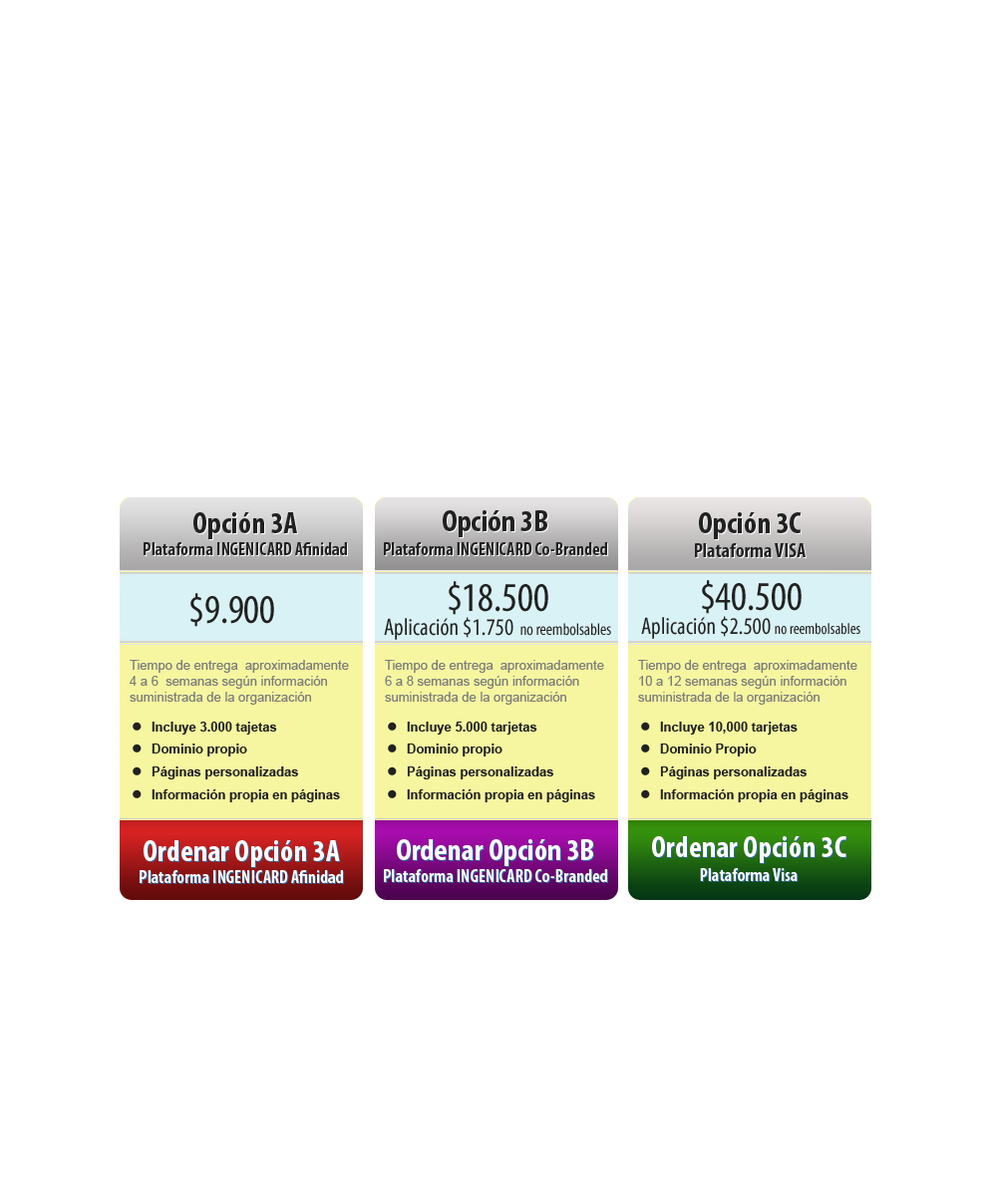
<style>
.page{position:relative;width:997px;height:1196px;background:#ffffff}
.page>*{position:absolute;margin:0}
.t1{font:17.9px "MyriadPro-BoldCond";color:#212121}
.t2{font:30.9px "MyriadPro-BoldCond";color:#212121}
.t3{font:17.9px/23.9px "MyriadPro-BoldCond";color:#212121}
.t4{font:30.9px/23.9px "MyriadPro-BoldCond";color:#212121}
.t5{font:19.9px/23.9px "MyriadPro-BoldCond";color:#212121}
.t6{font:23.9px/23.9px "MyriadPro-Cond";color:#212121}
.t7{font:40.9px/23.9px "MyriadPro-Cond";color:#212121}
.t8{font:16.9px/19.9px "MyriadPro-Cond";color:#212121}
.t9{font:15.9px/23.9px "MyriadPro-Cond";color:#212121}
.t10{font:40.9px "MyriadPro-Cond";color:#212121}
.t11{font:13px/15.9px "ArialMT";color:#7c7c7c}
.t12{font:13px "Arial-BoldMT";color:#212121}
.t13{font:17.9px "MyriadPro-BoldCond";color:#ffffff}
.t14{font:30.9px "MyriadPro-BoldCond";color:#ffffff}
.t15{font:30.9px/23.9px "MyriadPro-BoldCond";color:#ffffff}
.t16{font:17.9px/23.9px "MyriadPro-BoldCond";color:#ffffff}
</style>
<div class="page">
<p class="t1" style="left:144px;top:512px;width:203px;height:43px;text-align:center"><span class="t2">Opción 3A<br></span>Plataforma INGENICARD Afinidad</p>
<p class="t3" style="left:384px;top:510px;width:223px;height:45px;text-align:center"><span class="t4">Opción 3B<br></span>Plataforma INGENICARD Co-Branded</p>
<p class="t5" style="left:695px;top:512px;width:110px;height:45px;text-align:center"><span class="t4">Opción 3C<br></span>Plataforma VISA</p>
<p class="t6" style="left:384px;top:581px;width:227px;height:59px;text-align:center"><span class="t7">$18.500<br></span>Aplicación $1.750 <span class="t8">no reembolsables</span></p>
<p class="t6" style="left:641px;top:580px;width:219px;height:59px;text-align:center"><span class="t7">$40.500<br></span>Aplicación $2.500 <span class="t9">no reembolsables</span></p>
<p class="t10" style="left:190px;top:593px;width:84px;height:34px">$9.900</p>
<p class="t11" style="left:130px;top:660px;width:219px;height:45px">Tiempo de entrega  aproximadamente 4 a 6  semanas según información  suministrada de la organización suministrada.</p>
<p class="t11" style="left:385px;top:660px;width:219px;height:45px">Tiempo de entrega  aproximadamente 6 a 8 semanas según información  suministrada de la organización suministrada.</p>
<p class="t11" style="left:638px;top:660px;width:219px;height:45px">Tiempo de entrega  aproximadamente 10 a 12 semanas según información  suministrada de la organización suministrada.</p>
<p class="t12" style="left:152px;top:722px;width:125px;height:13px">Incluye 3.000 tajetas</p>
<p class="t12" style="left:407px;top:722px;width:130px;height:13px">Incluye 5.000 tarjetas</p>
<p class="t12" style="left:660px;top:722px;width:137px;height:13px">Incluye 10,000 tarjetas</p>
<p class="t12" style="left:152px;top:744px;width:95px;height:13px">Dominio propio</p>
<p class="t12" style="left:407px;top:744px;width:95px;height:13px">Dominio propio</p>
<p class="t12" style="left:660px;top:744px;width:97px;height:13px">Dominio Propio</p>
<p class="t12" style="left:152px;top:767px;width:146px;height:13px">Páginas personalizadas</p>
<p class="t12" style="left:407px;top:767px;width:146px;height:13px">Páginas personalizadas</p>
<p class="t12" style="left:660px;top:767px;width:146px;height:13px">Páginas personalizadas</p>
<p class="t12" style="left:152px;top:789px;width:188px;height:13px">Información propia en páginas</p>
<p class="t12" style="left:407px;top:789px;width:188px;height:13px">Información propia en páginas</p>
<p class="t12" style="left:660px;top:789px;width:188px;height:13px">Información propia en páginas</p>
<p class="t13" style="left:140px;top:840px;width:203px;height:43px;text-align:center"><span class="t14">Ordenar Opción 3A<br></span>Plataforma INGENICARD Afinidad</p>
<p class="t13" style="left:384px;top:839px;width:223px;height:43px;text-align:center"><span class="t14">Ordenar Opción 3B<br></span>Plataforma INGENICARD Co-Branded</p>
<p class="t15" style="left:652px;top:836px;width:194px;height:45px;text-align:center">Ordenar Opción 3C<br><span class="t16">Plataforma Visa</span></p>
</div>
